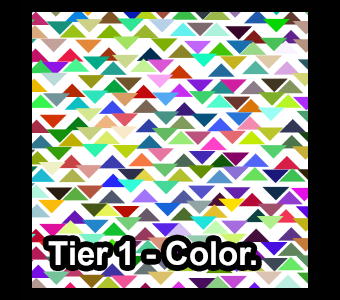
<style>
.page{position:relative;width:340px;height:300px;background:#ffffff}
.page>*{position:absolute;margin:0}
.t1{font:33px "Arial-BoldMT";color:#ffffff}
</style>
<div class="page">
<p class="t1" style="left:48px;top:240px;width:208px;height:26px">Tier 1 - Color.</p>
</div>
